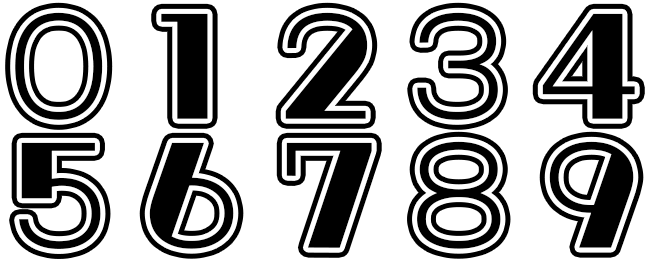
<style>
.page{position:relative;width:650px;height:260px;background:#ffffff}
.page>*{position:absolute;margin:0}
.t1{font:133.3px/129.2px "AB-lineboard_bold";color:#000000}
</style>
<div class="page">
<p class="t1" style="left:15px;top:12px;width:620px;height:237px">01234<br>56789</p>
</div>
